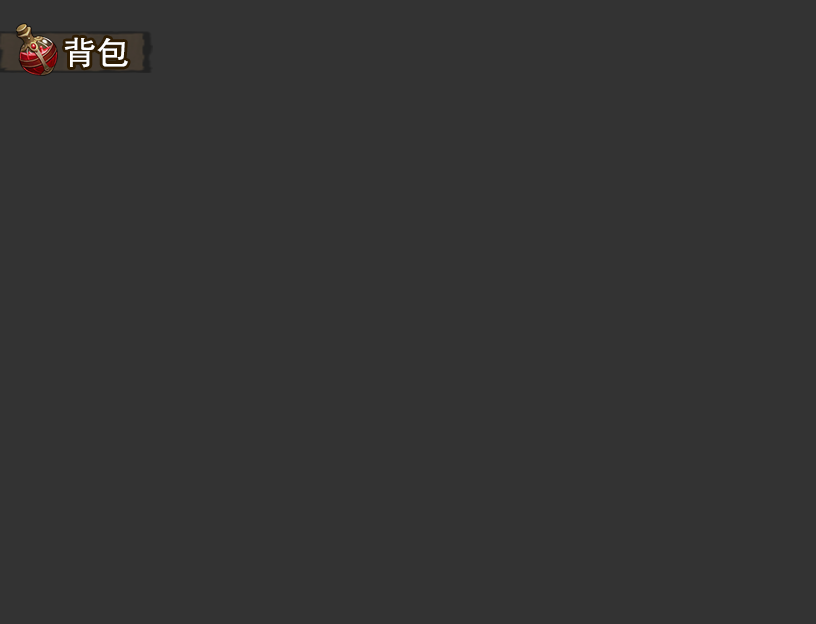
<style>
.page{position:relative;width:816px;height:624px;background:#333333}
.page>*{position:absolute;margin:0}
.t1{font:32.3px "FZHTJW--GB1-0";letter-spacing:-0.025em;color:#ffffff;scale:1.04 1}
</style>
<div class="page">
<p class="t1" style="left:64px;top:37px;width:64px;height:31px">背包</p>
</div>
